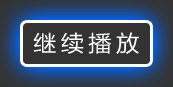
<style>
.page{position:relative;width:173px;height:87px;background:#333333}
.page>*{position:absolute;margin:0}
.t1{font:22.9px "FZLTHJW--GB1-0";letter-spacing:0.16em;color:#ffffff;scale:1.04 1}
</style>
<div class="page">
<p class="t1" style="left:33px;top:32px;width:106px;height:22px">继续播放</p>
</div>
